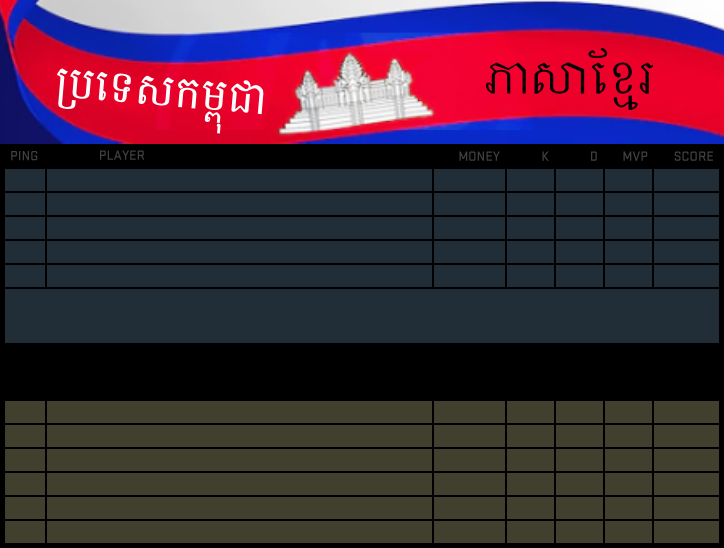
<style>
.page{position:relative;width:724px;height:548px;background:#413f2e}
.page>*{position:absolute;margin:0}
.t1{font:44.7px "StratumNo2-Medium";color:#fbfdfc}
.t2{font:14px "StratumNo2-Medium";color:#404040}
</style>
<div class="page">
<p class="t1" style="left:56px;top:68px;width:208px;height:66px;rotate:5deg">ប្រទេសកម្ពុជា</p>
<p class="t2" style="left:100px;top:150px;width:45px;height:10px">PLAYER</p>
<p class="t2" style="left:11px;top:151px;width:27px;height:10px">PING</p>
<p class="t2" style="left:459px;top:151px;width:41px;height:10px">MONEY</p>
<p class="t2" style="left:542px;top:151px;width:7px;height:10px">K</p>
<p class="t2" style="left:591px;top:151px;width:6px;height:10px">D</p>
<p class="t2" style="left:623px;top:151px;width:25px;height:10px">MVP</p>
<p class="t2" style="left:674px;top:151px;width:39px;height:10px">SCORE</p>
</div>
